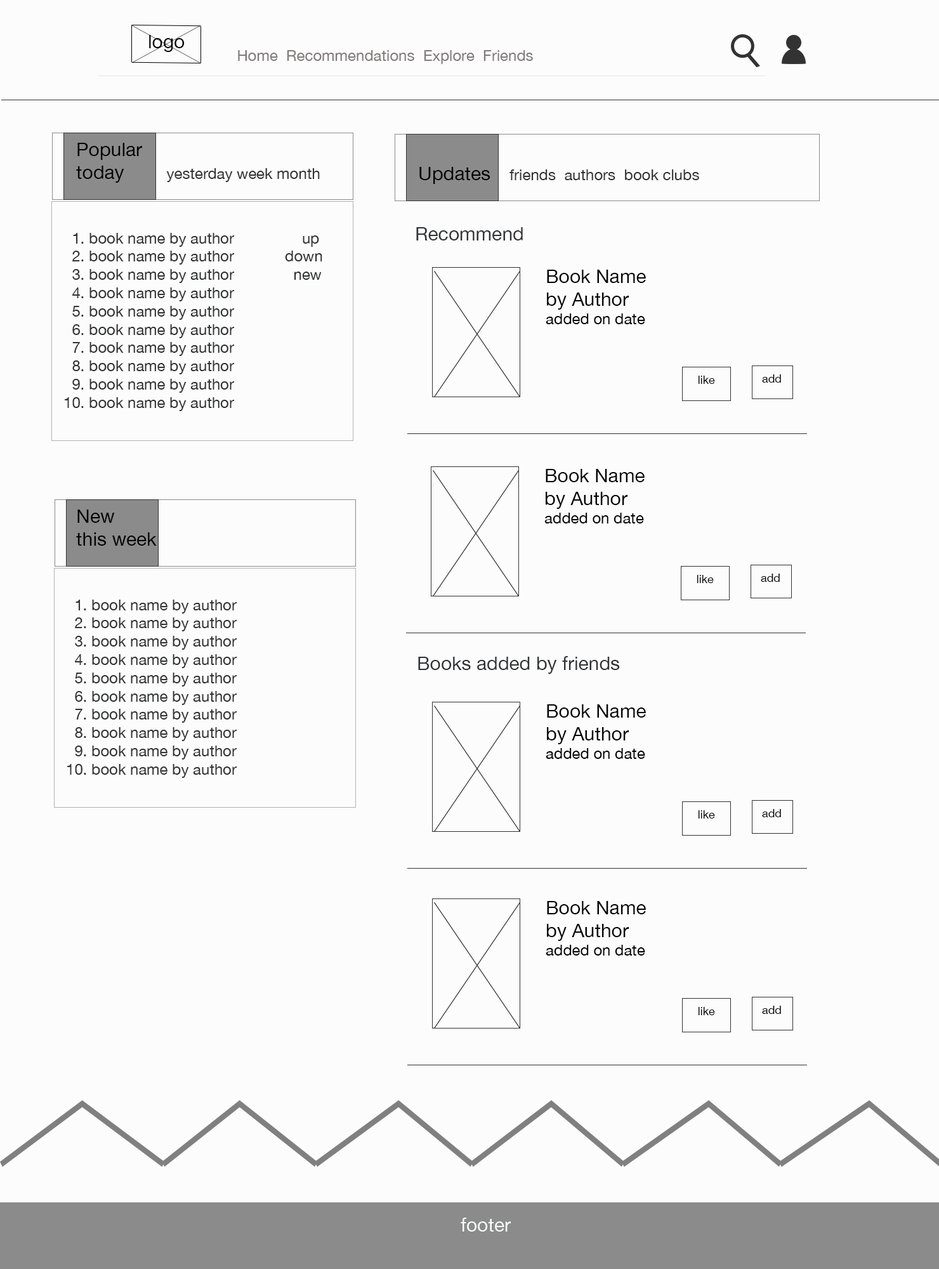
<style>
.page{position:relative;width:939px;height:1269px;background:#fdfcfc}
.page>*{position:absolute;margin:0}
.t1{font:19px "HelveticaNeue";color:#050505}
.t2{font:15.2px "HelveticaNeue";color:#817c7c}
.t3{font:15.2px "HelveticaNeue";color:#313436}
.t4{font:19px "HelveticaNeue";color:#030303}
.t5{font:19px "HelveticaNeue";color:#313436}
.t6{font:15.2px "HelveticaNeue";color:#030303}
.t7{font:11.4px "HelveticaNeue";color:#030303}
</style>
<div class="page">
<p class="t1" style="left:149px;top:35px;width:36px;height:17px">logo</p>
<p class="t2" style="left:238px;top:50px;width:295px;height:14px">Home  Recommendations  Explore  Friends</p>
<p class="t3" style="left:76px;top:143px;width:244px;height:40px"><span class="t4">Popular<br>today        </span>yesterday week month</p>
<p class="t3" style="left:420px;top:167px;width:279px;height:17px"><span class="t4">Updates    </span>friends  authors  book clubs</p>
<p class="t3" style="left:65px;top:233px;width:257px;height:178px">1. book name by author                up <br>  2. book name by author            down<br>  3. book name by author              new<br>  4. book name by author<br>  5. book name by author<br>  6. book name by author     <br>  7. book name by author<br>  8. book name by author<br>  9. book name by author<br>10. book name by author</p>
<p class="t5" style="left:416px;top:227px;width:107px;height:14px">Recommend</p>
<p class="t4" style="left:546px;top:270px;width:100px;height:54px">Book Name<br>by Author<br><span class="t6">added on date</span></p>
<p class="t7" style="left:698px;top:376px;width:17px;height:8px">like</p>
<p class="t7" style="left:762px;top:374px;width:19px;height:9px">add</p>
<p class="t4" style="left:545px;top:469px;width:100px;height:55px">Book Name<br>by Author<br><span class="t6">added on date</span></p>
<p class="t4" style="left:76px;top:510px;width:81px;height:36px">New <br>this week</p>
<p class="t7" style="left:697px;top:575px;width:17px;height:8px">like</p>
<p class="t7" style="left:761px;top:574px;width:19px;height:8px">add</p>
<p class="t3" style="left:67px;top:600px;width:170px;height:178px">1. book name by author               <br>  2. book name by author            <br>  3. book name by author              <br>  4. book name by author<br>  5. book name by author<br>  6. book name by author     <br>  7. book name by author<br>  8. book name by author<br>  9. book name by author<br>10. book name by author</p>
<p class="t5" style="left:418px;top:656px;width:202px;height:18px">Books added by friends</p>
<p class="t4" style="left:546px;top:705px;width:100px;height:54px">Book Name<br>by Author<br><span class="t6">added on date</span></p>
<p class="t7" style="left:762px;top:809px;width:19px;height:8px">add</p>
<p class="t7" style="left:698px;top:811px;width:17px;height:8px">like</p>
<p class="t4" style="left:546px;top:901px;width:100px;height:55px">Book Name<br>by Author<br><span class="t6">added on date</span></p>
<p class="t7" style="left:698px;top:1007px;width:17px;height:9px">like</p>
<p class="t7" style="left:762px;top:1006px;width:19px;height:8px">add</p>
</div>
